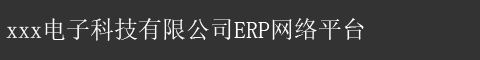
<style>
.page{position:relative;width:480px;height:60px;background:#333333}
.page>*{position:absolute;margin:0}
.t1{font:24px "SimSun";color:#ffffff}
</style>
<div class="page">
<p class="t1" style="left:6px;top:18px;width:358px;height:23px">xxx电子科技有限公司ERP网络平台</p>
</div>
